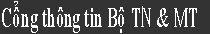
<style>
.page{position:relative;width:210px;height:34px;background:#333333}
.page>*{position:absolute;margin:0}
.t1{font:27.6px "TimesNewRomanPS-BoldMT";color:#ffffff;scale:0.57 1}
</style>
<div class="page">
<p class="t1" style="left:2px;top:1px;width:195px;height:32px">Cổng thông tin Bộ TN &amp; MT</p>
</div>
